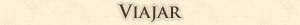
<style>
.page{position:relative;width:300px;height:25px}
.page>*{position:absolute;margin:0}
.t1{font:18px "TrajanPro-Bold";color:#453526}
</style>
<div class="page">
<p class="t1" style="left:118px;top:4px;width:64px;height:18px">Viajar</p>
</div>
